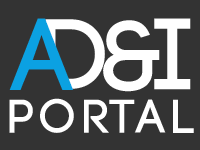
<style>
.page{position:relative;width:200px;height:150px;background:#333333}
.page>*{position:absolute;margin:0}
.t1{font:100px "Code-Bold";color:#0ba1e2}
.t2{font:100px "Code-Bold";color:#ffffff}
.t3{font:48px "Code-Bold";letter-spacing:0.12em;color:#ffffff}
</style>
<div class="page">
<p class="t1" style="left:9px;top:18px;width:65px;height:72px">A</p>
<p class="t2" style="left:45px;top:19px;width:60px;height:70px">D</p>
<p class="t2" style="left:103px;top:20px;width:57px;height:72px">&amp;</p>
<p class="t2" style="left:154px;top:18px;width:37px;height:72px">I</p>
<p class="t3" style="left:9px;top:98px;width:185px;height:35px">Portal</p>
</div>
